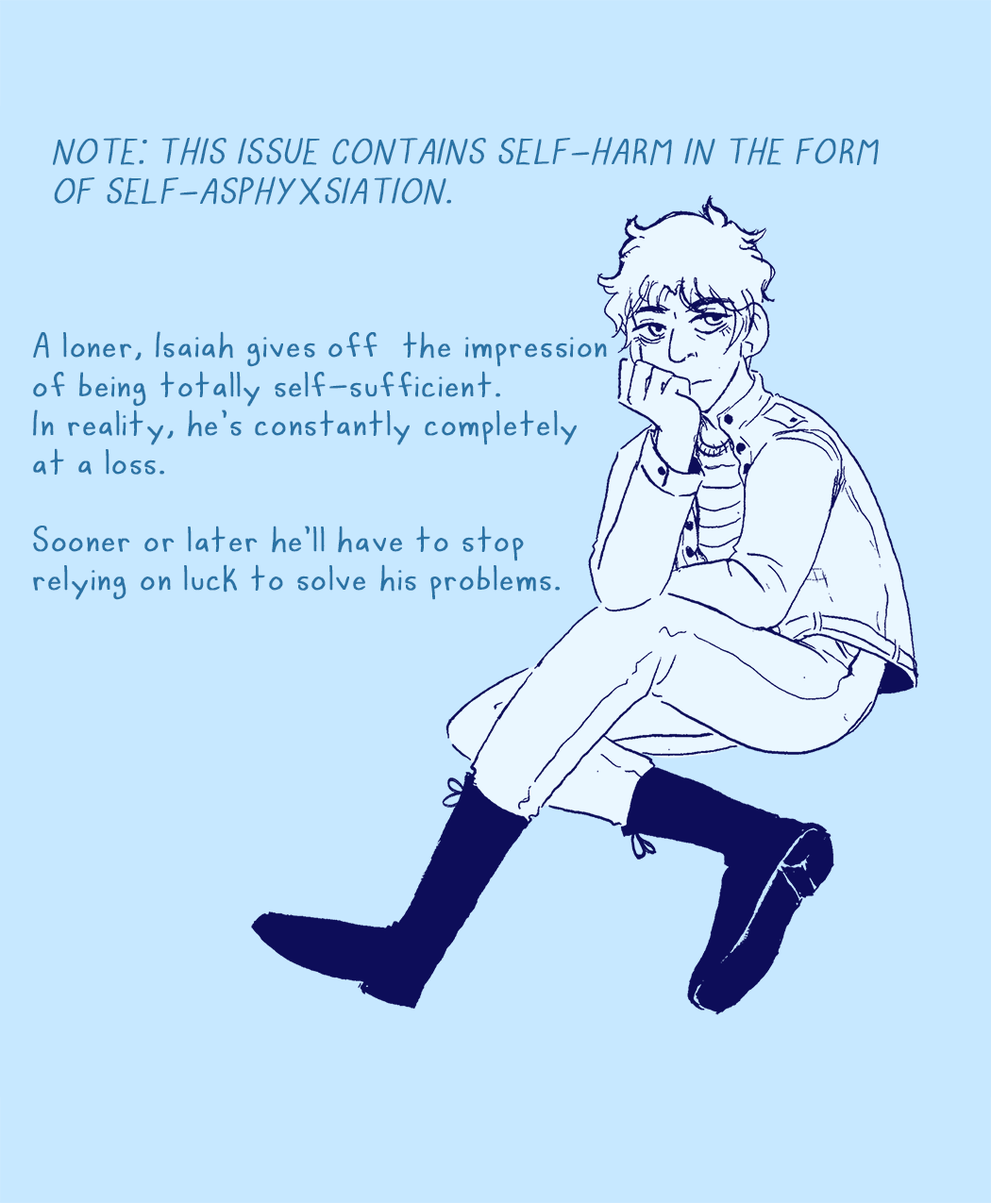
<style>
.page{position:relative;width:991px;height:1203px;background:#c7e8ff}
.page>*{position:absolute;margin:0}
.t1{font:38.9px/38.9px "Yinz2020-Regular";color:#2b73a5;text-transform:uppercase;font-weight:bold;font-style:italic}
.t2{font:38.9px/38.9px "Yinz2020-Regular";color:#2b73a5;font-weight:bold}
</style>
<div class="page">
<p class="t1" style="left:53px;top:137px;width:826px;height:68px">NOTE: this issue contains SELF-HARM IN THE FORM<br>OF self-asphyxsiation.</p>
<p class="t2" style="left:33px;top:331px;width:574px;height:269px">A loner, Isaiah gives off  the impression<br>of being totally self-sufficient.<br>In reality, he's constantly completely<br>at a loss.<br><br>Sooner or later he'll have to stop<br>relying on luck to solve his problems.</p>
</div>
